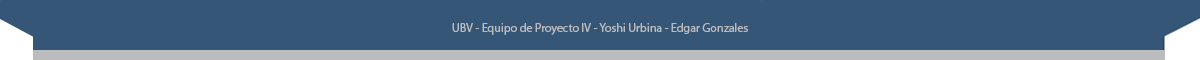
<style>
.page{position:relative;width:1200px;height:60px;background:#355677}
.page>*{position:absolute;margin:0}
.t1{font:12px "MyriadPro-Regular";color:#babcbe}
</style>
<div class="page">
<p class="t1" style="left:452px;top:23px;width:296px;height:12px">UBV - Equipo de Proyecto IV - Yoshi Urbina - Edgar Gonzales</p>
</div>
